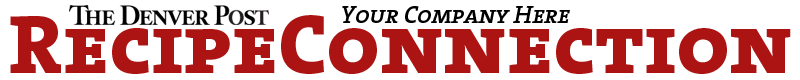
<style>
.page{position:relative;width:800px;height:80px;background:#ffffff}
.page>*{position:absolute;margin:0}
.t1{font:25px "TheSerifSemiBold-CapsItalic";letter-spacing:-0.025em;color:#000000}
.t2{font:85px "TheSerifExtraBold-Caps";color:#ac1414}
</style>
<div class="page">
<p class="t1" style="left:342px;top:6px;width:228px;height:17px">Your Company Here</p>
<p class="t2" style="left:10px;top:15px;width:781px;height:59px">RecipeConnection</p>
</div>
